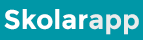
<style>
.page{position:relative;width:143px;height:40px;background:#0097a7}
.page>*{position:absolute;margin:0}
.t1{font:26.9px "Montserrat-Bold";color:#ffffff}
.t2{font:26.9px "Montserrat-Bold";color:#eaecec}
</style>
<div class="page">
<p class="t1" style="left:4px;top:9px;width:135px;height:26px">Skolar<span class="t2">app</span></p>
</div>
